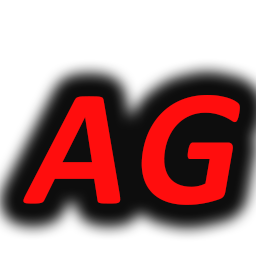
<style>
.page{position:relative;width:256px;height:256px;background:#ffffff}
.page>*{position:absolute;margin:0}
.t1{font:168px "Calibri-Bold";letter-spacing:0.05em;color:#ff0000;font-style:italic}
</style>
<div class="page">
<p class="t1" style="left:23px;top:95px;width:217px;height:110px;opacity:0.95">AG</p>
</div>
